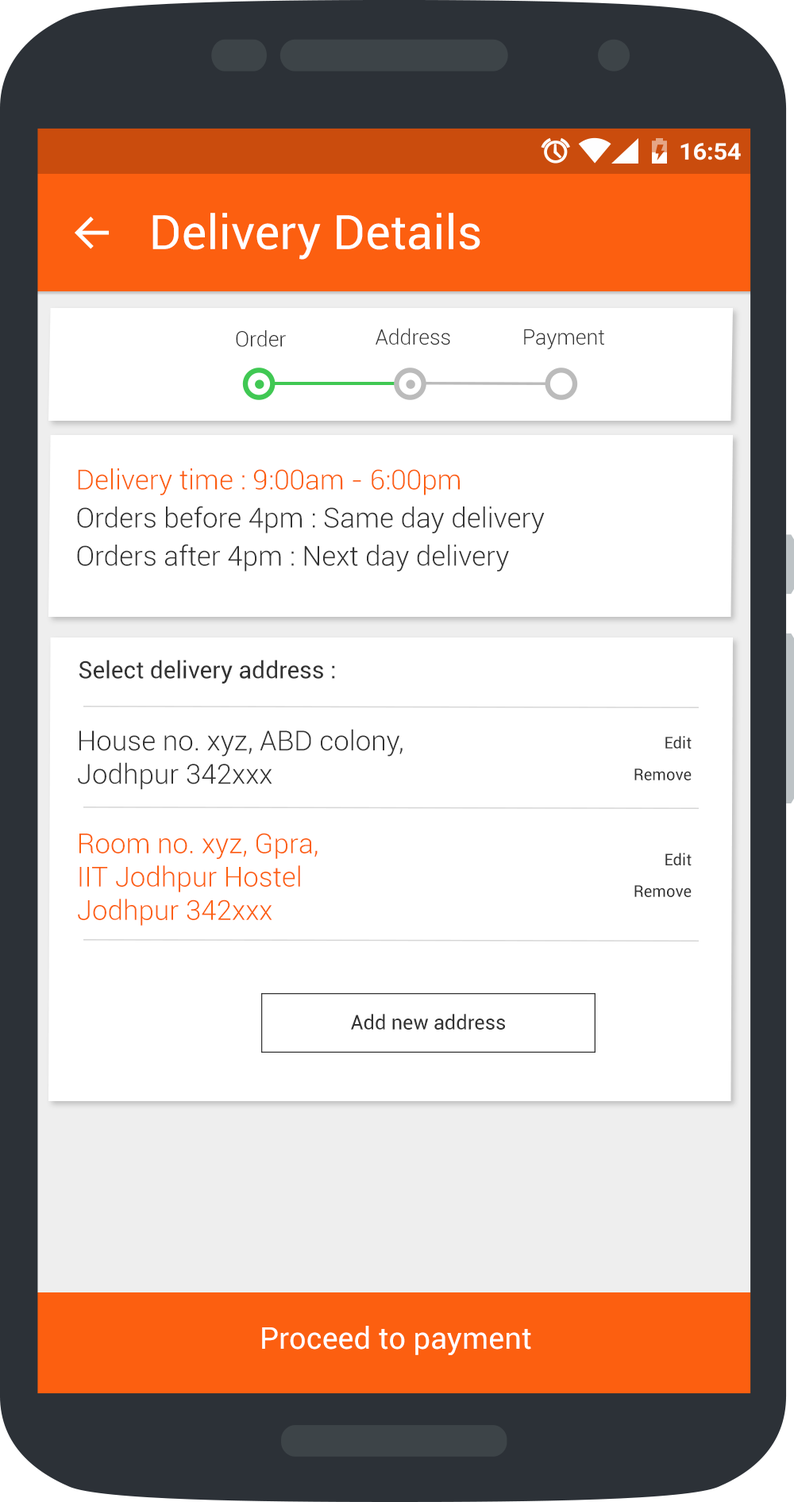
<style>
.page{position:relative;width:794px;height:1502px;background:#ffffff}
.page>*{position:absolute;margin:0}
.t1{font:47.4px "Roboto-Regular";color:#ffffff}
.t2{font:21.2px "Roboto-Light";color:#333333}
.t3{font:27.8px/38.1px "Roboto-Light";color:#333333}
.t4{font:27.8px/38.1px "Roboto-Light";color:#fc5f10}
.t5{font:23.8px "Roboto-Regular";color:#333333}
.t6{font:27.8px "Roboto-Light";color:#333333}
.t7{font:16.1px "Roboto-Regular";color:#333333}
.t8{font:27.8px "Roboto-Light";color:#fc5f10}
.t9{font:20.1px "Roboto-Regular";color:#333333}
.t10{font:30.2px "Roboto-Regular";color:#ffffff}
</style>
<div class="page">
<p class="t1" style="left:152px;top:213px;width:328px;height:47px">Delivery Details</p>
<p class="t2" style="left:376px;top:328px;width:74px;height:17px">Address</p>
<p class="t2" style="left:524px;top:329px;width:80px;height:20px">Payment</p>
<p class="t2" style="left:236px;top:330px;width:50px;height:17px">Order</p>
<p class="t3" style="left:77px;top:468px;width:468px;height:104px"><span class="t4">Delivery time : 9:00am - 6:00pm<br></span>Orders before 4pm : Same day delivery<br>Orders after 4pm : Next day delivery</p>
<p class="t5" style="left:79px;top:660px;width:256px;height:24px">Select delivery address :</p>
<p class="t6" style="left:78px;top:729px;width:324px;height:61px">House no. xyz, ABD colony,<br>Jodhpur 342xxx</p>
<p class="t7" style="left:665px;top:736px;width:26px;height:13px">Edit</p>
<p class="t7" style="left:634px;top:768px;width:57px;height:12px">Remove</p>
<p class="t8" style="left:78px;top:833px;width:240px;height:93px">Room no. xyz, Gpra,<br>IIT Jodhpur Hostel<br>Jodhpur 342xxx</p>
<p class="t7" style="left:665px;top:853px;width:26px;height:13px">Edit</p>
<p class="t7" style="left:634px;top:885px;width:57px;height:12px">Remove</p>
<p class="t9" style="left:351px;top:1014px;width:154px;height:16px">Add new address</p>
<p class="t10" style="left:262px;top:1326px;width:269px;height:29px">Proceed to payment</p>
</div>
